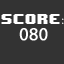
<style>
.page{position:relative;width:64px;height:64px;background:#333333}
.page>*{position:absolute;margin:0}
.t1{font:12px "8BITWONDERNominal";color:#ffffff}
.t2{font:12px "MyriadPro-Regular";color:#ffffff}
.t3{font:18px "MyriadPro-Regular";color:#ffffff;font-weight:bold}
</style>
<div class="page">
<p class="t1" style="left:1px;top:14px;width:63px;height:10px">score<span class="t2">:</span></p>
<p class="t3" style="left:19px;top:28px;width:29px;height:13px">080</p>
</div>
